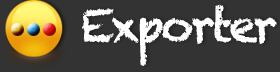
<style>
.page{position:relative;width:280px;height:72px;background:#333333}
.page>*{position:absolute;margin:0}
.t1{font:45px "Chalkduster";letter-spacing:-0.065em;color:#ffffff}
</style>
<div class="page">
<p class="t1" style="left:82px;top:4px;width:195px;height:62px">Exporter</p>
</div>
